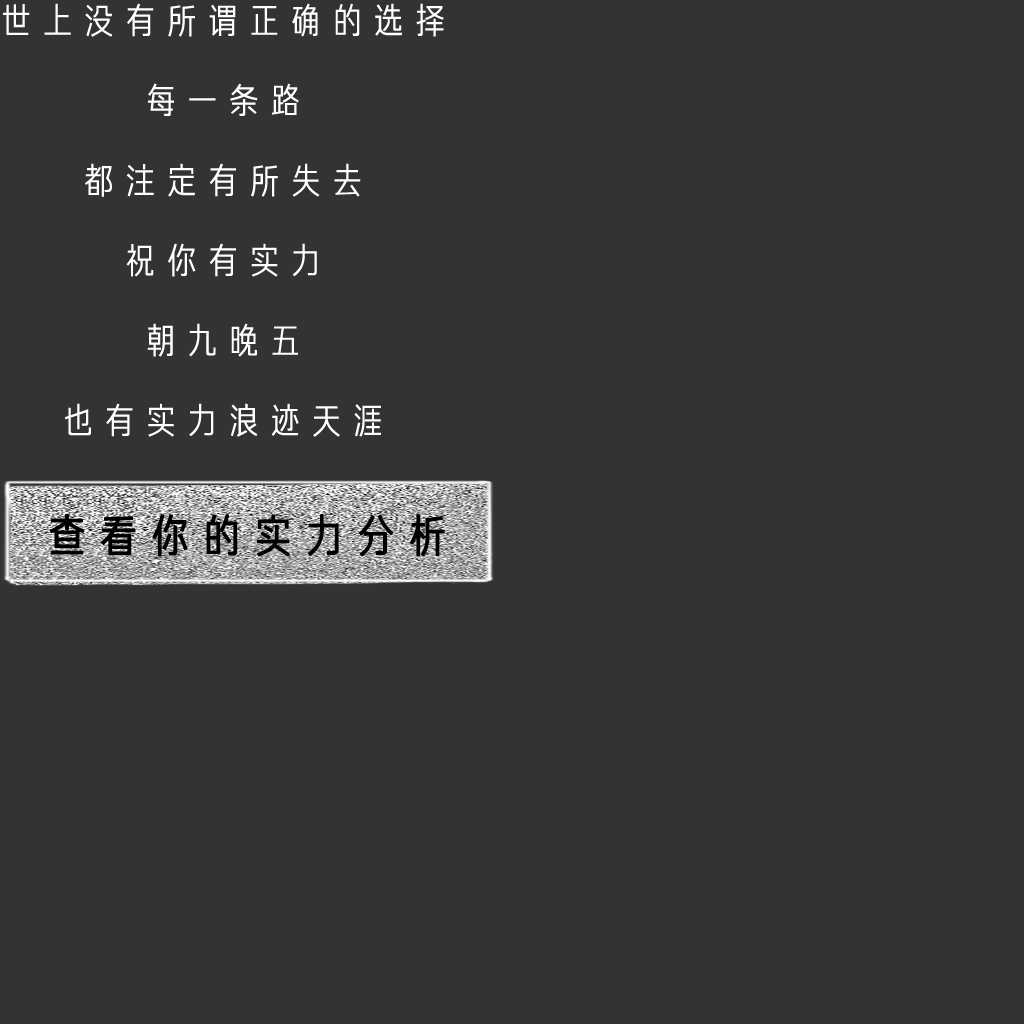
<style>
.page{position:relative;width:1024px;height:1024px;background:#333333}
.page>*{position:absolute;margin:0}
.t1{font:36px/80px "FZJHJW--GB1-0";letter-spacing:0.15em;color:#ffffff}
.t2{font:45.2px "FZJHJW--GB1-0";letter-spacing:0.119em;color:#000000;font-weight:bold}
</style>
<div class="page">
<p class="t1" style="left:3px;top:3px;width:441px;height:434px;text-align:center">世上没有所谓正确的选择<br>每一条路<br>都注定有所失去<br>祝你有实力<br>朝九晚五<br>也有实力浪迹天涯</p>
<p class="t2" style="left:49px;top:514px;width:396px;height:43px">查看你的实力分析</p>
</div>
